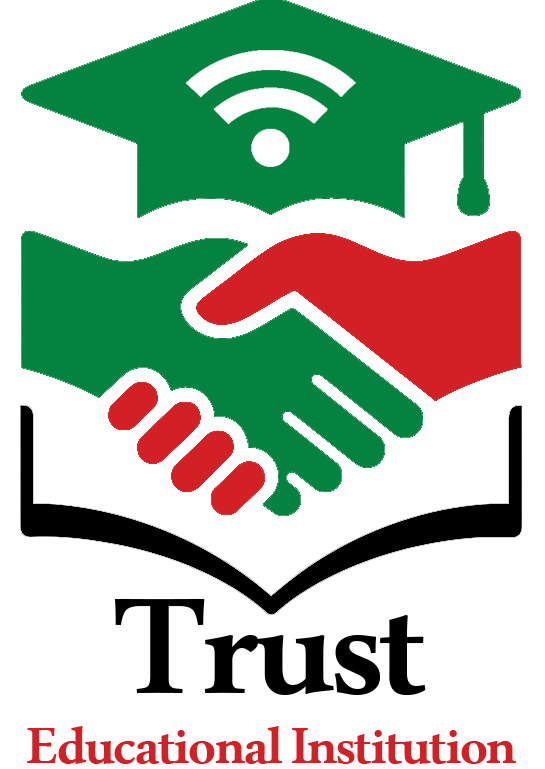
<style>
.page{position:relative;width:545px;height:769px;background:#ffffff}
.page>*{position:absolute;margin:0}
.t1{font:75px/70px "MicrosoftUighur-Bold";letter-spacing:-0.02em;color:#d22025}
.t2{font:200px/70px "MicrosoftUighur-Bold";letter-spacing:-0.02em;color:#000000}
</style>
<div class="page">
<p class="t1" style="left:27px;top:599px;width:489px;height:165px;text-align:center"><span class="t2">Trust<br></span>Educational Institution</p>
</div>
